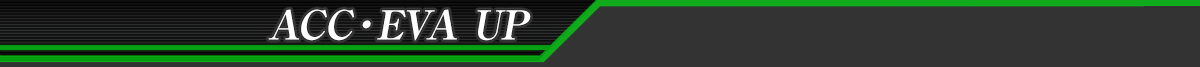
<style>
.page{position:relative;width:1200px;height:67px;background:#333333}
.page>*{position:absolute;margin:0}
.t1{font:40px "RyuminPro-ExBold";color:#ffffff;font-style:italic}
</style>
<div class="page">
<p class="t1" style="left:268px;top:9px;width:263px;height:32px">ACC・EVA UP</p>
</div>
